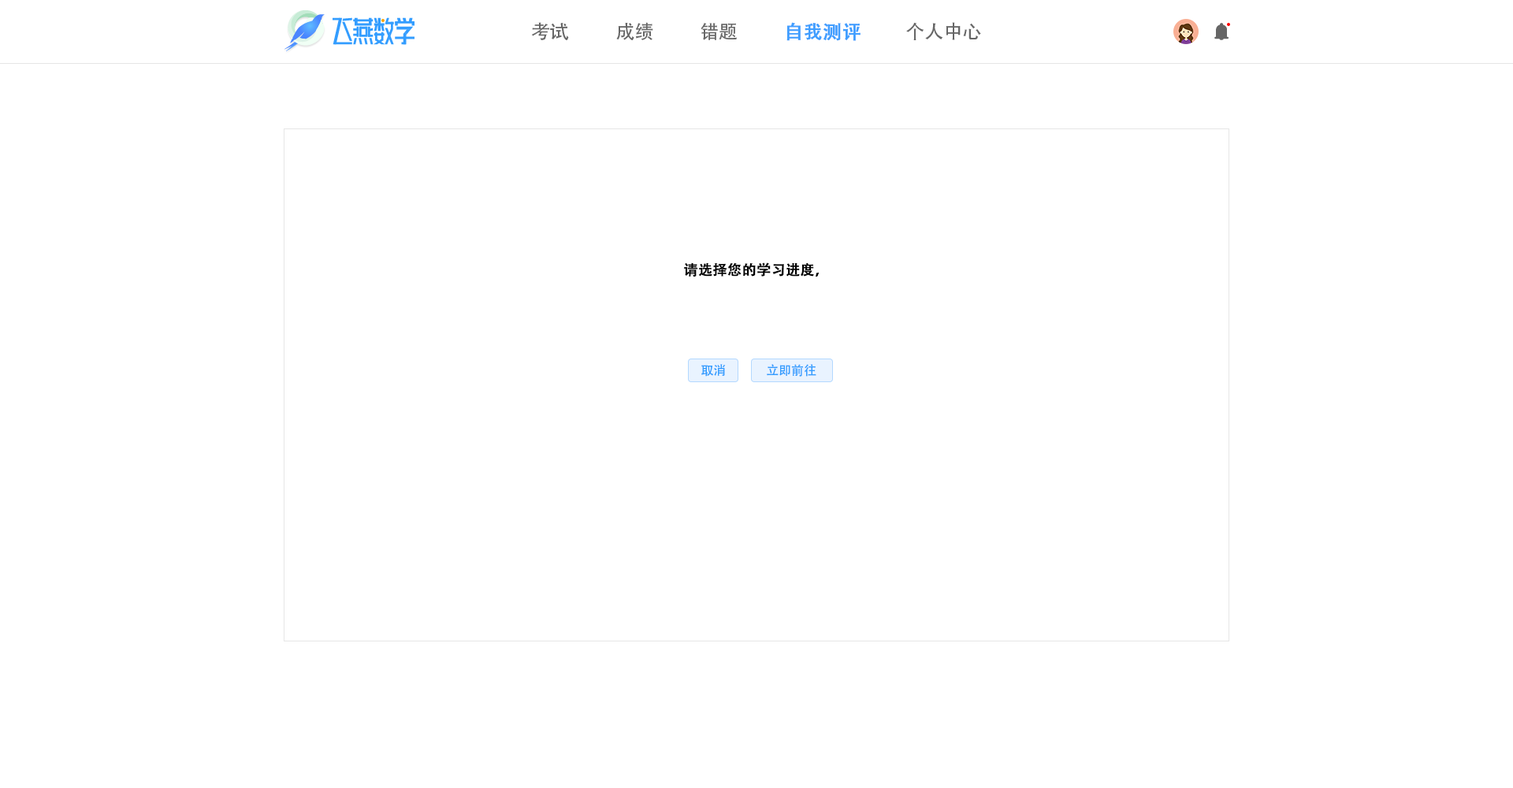
<style>
.page{position:relative;width:1513px;height:788px;background:#ffffff}
.page>*{position:absolute;margin:0}
.t1{font:18.9px "AdobeHeitiStd-Regular";color:#666666}
.t2{font:18.9px "AdobeHeitiStd-Regular";color:#409eff;font-weight:bold}
.t3{font:14.2px "AdobeHeitiStd-Regular";color:#000000;font-weight:bold}
.t4{font:12.6px "AdobeHeitiStd-Regular";color:#339dff}
</style>
<div class="page">
<p class="t1" style="left:531px;top:22px;width:38px;height:18px">考试</p>
<p class="t1" style="left:616px;top:22px;width:37px;height:18px">成绩</p>
<p class="t1" style="left:701px;top:23px;width:36px;height:17px">错题</p>
<p class="t2" style="left:786px;top:22px;width:75px;height:19px">自我测评</p>
<p class="t1" style="left:906px;top:22px;width:75px;height:18px">个人中心</p>
<p class="t3" style="left:684px;top:262px;width:136px;height:15px">请选择您的学习进度，</p>
<p class="t4" style="left:701px;top:364px;width:25px;height:13px">取消</p>
<p class="t4" style="left:767px;top:364px;width:49px;height:13px">立即前往</p>
</div>
